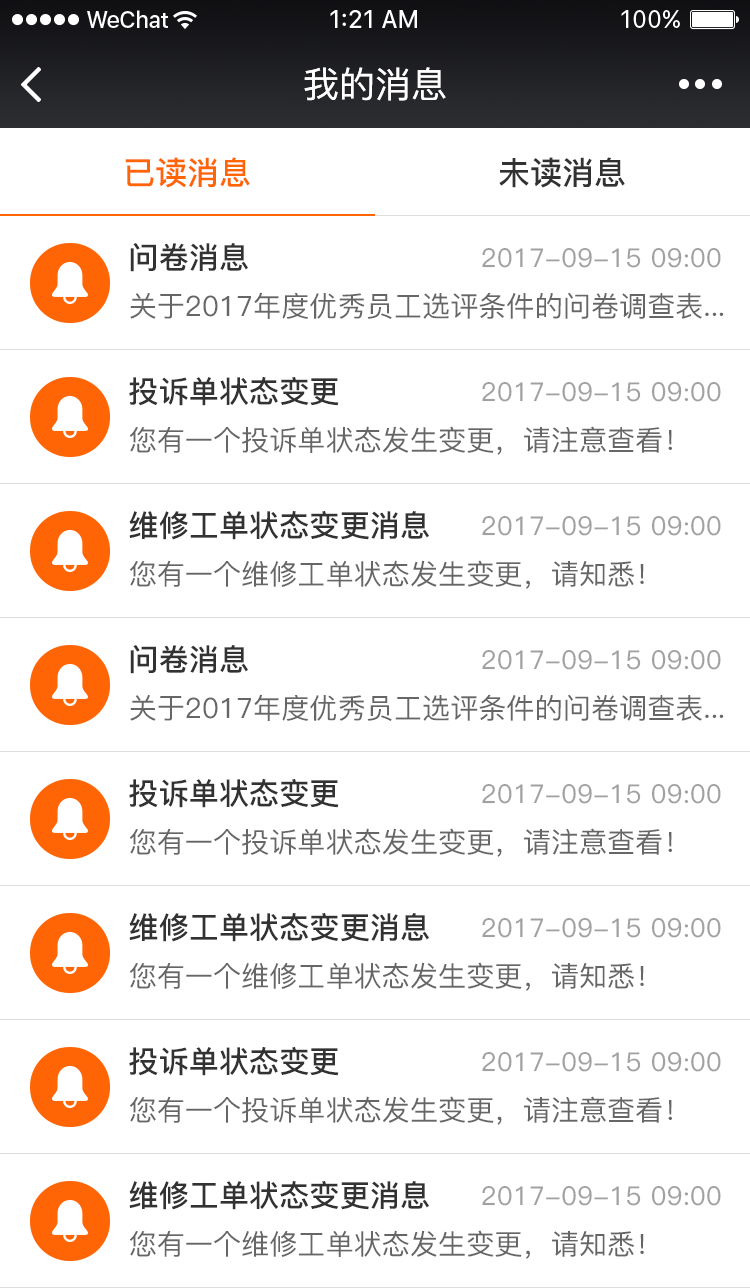
<style>
.page{position:relative;width:750px;height:1288px;background:#ffffff}
.page>*{position:absolute;margin:0}
.t1{font:36px "PingFang-SC-Medium";color:#ffffff}
.t2{font:32px "PingFang-SC-Bold";color:#ff6405}
.t3{font:32px "PingFang-SC-Bold";color:#323232}
.t4{font:30.1px "PingFang-SC-Bold";color:#323232}
.t5{font:26px "PingFang-SC-Medium";color:#a1a1a1}
.t6{font:28.1px "PingFang-SC-Medium";color:#666666}
</style>
<div class="page">
<p class="t1" style="left:304px;top:67px;width:142px;height:34px">我的消息</p>
<p class="t2" style="left:125px;top:157px;width:125px;height:31px">已读消息</p>
<p class="t3" style="left:499px;top:157px;width:126px;height:31px">未读消息</p>
<p class="t4" style="left:130px;top:243px;width:118px;height:29px">问卷消息</p>
<p class="t5" style="left:482px;top:247px;width:239px;height:21px">2017-09-15 09:00</p>
<p class="t6" style="left:130px;top:292px;width:594px;height:27px">关于2017年度优秀员工选评条件的问卷调查表...</p>
<p class="t4" style="left:129px;top:377px;width:210px;height:29px">投诉单状态变更</p>
<p class="t5" style="left:482px;top:381px;width:239px;height:21px">2017-09-15 09:00</p>
<p class="t6" style="left:130px;top:426px;width:542px;height:29px">您有一个投诉单状态发生变更，请注意查看！</p>
<p class="t4" style="left:129px;top:511px;width:300px;height:29px">维修工单状态变更消息</p>
<p class="t5" style="left:482px;top:515px;width:239px;height:21px">2017-09-15 09:00</p>
<p class="t6" style="left:130px;top:560px;width:514px;height:29px">您有一个维修工单状态发生变更，请知悉！</p>
<p class="t4" style="left:130px;top:645px;width:118px;height:29px">问卷消息</p>
<p class="t5" style="left:482px;top:649px;width:239px;height:21px">2017-09-15 09:00</p>
<p class="t6" style="left:130px;top:694px;width:594px;height:27px">关于2017年度优秀员工选评条件的问卷调查表...</p>
<p class="t4" style="left:129px;top:779px;width:210px;height:29px">投诉单状态变更</p>
<p class="t5" style="left:482px;top:783px;width:239px;height:21px">2017-09-15 09:00</p>
<p class="t6" style="left:130px;top:828px;width:542px;height:29px">您有一个投诉单状态发生变更，请注意查看！</p>
<p class="t4" style="left:129px;top:913px;width:300px;height:29px">维修工单状态变更消息</p>
<p class="t5" style="left:482px;top:917px;width:239px;height:21px">2017-09-15 09:00</p>
<p class="t6" style="left:130px;top:962px;width:514px;height:29px">您有一个维修工单状态发生变更，请知悉！</p>
<p class="t4" style="left:129px;top:1047px;width:210px;height:29px">投诉单状态变更</p>
<p class="t5" style="left:482px;top:1051px;width:239px;height:21px">2017-09-15 09:00</p>
<p class="t6" style="left:130px;top:1096px;width:542px;height:29px">您有一个投诉单状态发生变更，请注意查看！</p>
<p class="t4" style="left:129px;top:1181px;width:300px;height:29px">维修工单状态变更消息</p>
<p class="t5" style="left:482px;top:1185px;width:239px;height:21px">2017-09-15 09:00</p>
<p class="t6" style="left:130px;top:1230px;width:514px;height:29px">您有一个维修工单状态发生变更，请知悉！</p>
</div>
